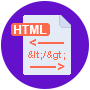
<style>
.page{position:relative;width:90px;height:90px;background:#6411cc}
.page>*{position:absolute;margin:0}
.t1{font:12px "Arial-BoldMT";color:#ffffff}
.t2{font:12px "Arial-BoldMT";color:#ff694b}
.t3{font:10px "Arial-BoldMT";color:#ff694b}
</style>
<div class="page">
<p class="t1" style="left:14px;top:25px;width:33px;height:9px">HTML</p>
<p class="t2" style="left:30px;top:39px;width:6px;height:7px">&lt;</p>
<p class="t3" style="left:28px;top:51px;width:37px;height:9px">&amp;lt;/&amp;gt;</p>
<p class="t2" style="left:58px;top:63px;width:6px;height:7px">&gt;</p>
</div>
